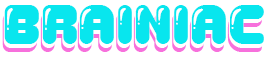
<style>
.page{position:relative;width:267px;height:57px;background:#08e6ee}
.page>*{position:absolute;margin:0}
.t1{font:57px "GummyBook-Regular";color:#08e6ee}
.t2{font:57px "Gummy-Regular";color:#08e6ee}
.t3{font:57px "GummyBook-Regular"}
</style>
<div class="page">
<p class="t1" style="left:4px;top:5px;width:260px;height:39px">Brainiac</p>
<p class="t2" style="left:4px;top:5px;width:260px;height:39px">Brainiac</p>
<p class="t3" style="left:2px;top:13px;width:260px;height:39px">Brainiac</p>
<p class="t1" style="left:3px;top:9px;width:260px;height:39px">Brainiac</p>
</div>
